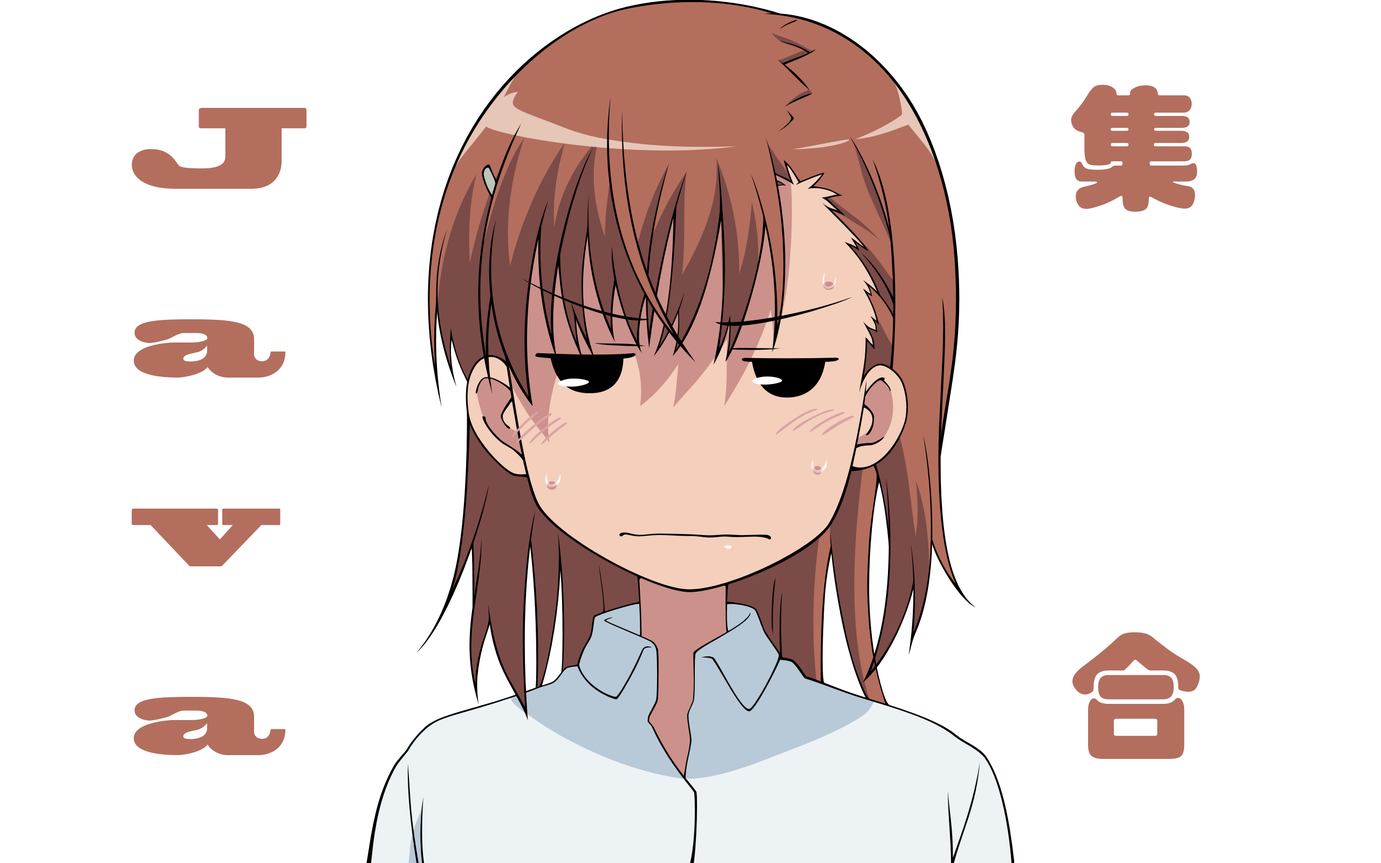
<style>
.page{position:relative;width:1381px;height:863px;background:#ffffff}
.page>*{position:absolute;margin:0}
.t1{font:134.9px "STHupo";color:#b36e5e}
.t2{font:107.9px "BlackoakStd";color:#b36e5e}
</style>
<div class="page">
<p class="t1" style="left:1071px;top:85px;width:126px;height:127px">集</p>
<p class="t2" style="left:132px;top:108px;width:175px;height:647px">J<br>a<br>v<br>a</p>
<p class="t1" style="left:1073px;top:632px;width:127px;height:127px">合</p>
</div>
